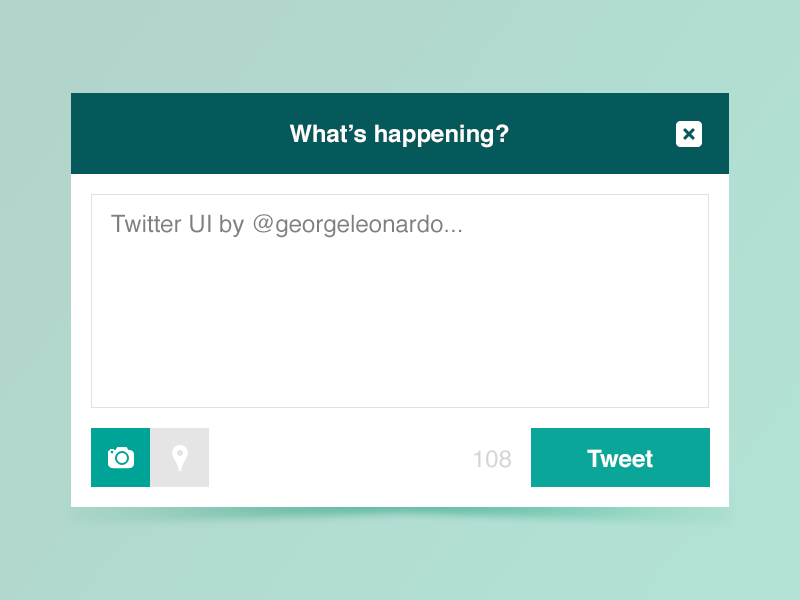
<style>
.page{position:relative;width:800px;height:600px;background:#ffffff}
.page>*{position:absolute;margin:0}
.t1{font:24px "Helvetica-Bold";color:#ffffff}
.t2{font:24px "Helvetica";color:#808080}
.t3{font:24px "Helvetica";color:#d5d5d5}
</style>
<div class="page">
<p class="t1" style="left:289px;top:124px;width:220px;height:24px">What’s happening?</p>
<p class="t2" style="left:111px;top:214px;width:351px;height:24px">Twitter UI by @georgeleonardo...</p>
<p class="t1" style="left:587px;top:449px;width:66px;height:19px">Tweet</p>
<p class="t3" style="left:474px;top:450px;width:37px;height:18px">108</p>
</div>
